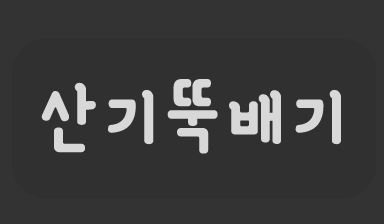
<style>
.page{position:relative;width:384px;height:224px;background:#303030}
.page>*{position:absolute;margin:0}
.t1{font:90px "YanoljaYacheB";letter-spacing:0.1em;color:#d8d8d8}
</style>
<div class="page">
<p class="t1" style="left:41px;top:79px;width:300px;height:75px">산기뚝배기</p>
</div>
